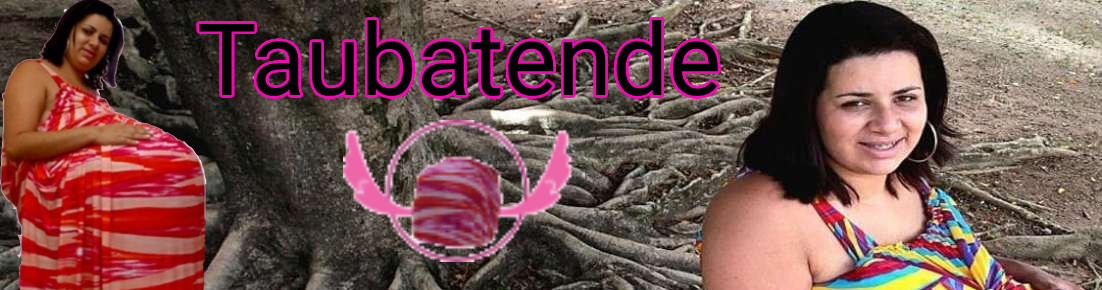
<style>
.page{position:relative;width:1102px;height:290px}
.page>*{position:absolute;margin:0}
.t1{font:100px "Roboto-Regular";color:#000000}
</style>
<div class="page">
<p class="t1" style="left:199px;top:20px;width:519px;height:76px">Taubatende</p>
</div>
